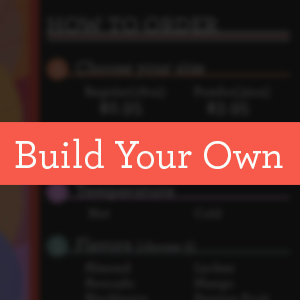
<style>
.page{position:relative;width:300px;height:300px;background:#0d0d0d}
.page>*{position:absolute;margin:0}
.t1{font:40px "Archer-Medium";color:#f9fdfa}
</style>
<div class="page">
<p class="t1" style="left:15px;top:138px;width:268px;height:31px">Build Your Own</p>
</div>
